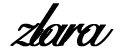
<style>
.page{position:relative;width:121px;height:51px;background:#ffffff}
.page>*{position:absolute;margin:0}
.t1{font:60px "SnellRoundhand";letter-spacing:-0.1em;color:#000000;font-weight:bold}
</style>
<div class="page">
<p class="t1" style="left:10px;top:3px;width:104px;height:44px">zlara</p>
</div>
